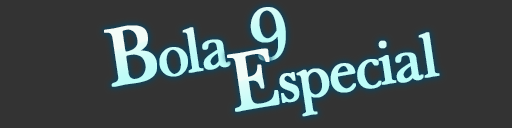
<style>
.page{position:relative;width:512px;height:128px;background:#333333}
.page>*{position:absolute;margin:0}
.t1{font:70px "BaskervilleLight";letter-spacing:-0.06em;color:#c4fcf8;font-weight:bold;scale:0.93 1}
.t2{font:97px "BaskervilleLight";letter-spacing:-0.06em;color:#c4fcf8;font-weight:bold;scale:0.93 1}
.t3{font:86px "BaskervilleLight";letter-spacing:-0.06em;color:#c4fcf8;font-weight:bold;scale:0.93 1}
.t4{font:70px "BaskervilleLight";letter-spacing:-0.06em;color:#c2fcf8;font-weight:bold;scale:0.93 1}
.t5{font:97px "BaskervilleLight";letter-spacing:-0.06em;color:#c2fcf8;font-weight:bold;scale:0.93 1}
</style>
<div class="page">
<p class="t1" style="left:104px;top:7px;width:182px;height:80px;rotate:-10deg"><span class="t2">B</span>ola <span class="t3">9</span></p>
<p class="t4" style="left:227px;top:32px;width:213px;height:85px;rotate:-10deg"><span class="t5">E</span>special</p>
</div>
